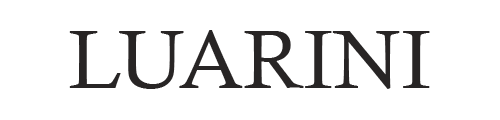
<style>
.page{position:relative;width:500px;height:120px;background:#ffffff}
.page>*{position:absolute;margin:0}
.t1{font:83.3px "CalistoMT";color:#282525}
</style>
<div class="page">
<p class="t1" style="left:69px;top:30px;width:361px;height:59px">LUARINI</p>
</div>
